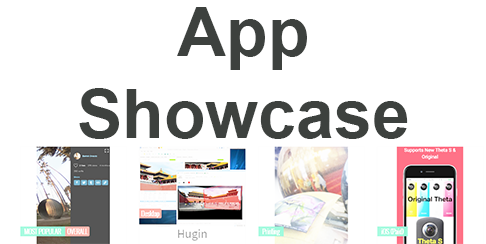
<style>
.page{position:relative;width:486px;height:244px;background:#ffffff}
.page>*{position:absolute;margin:0}
.t1{font:68px "Arial-BoldMT";color:#3d413e}
</style>
<div class="page">
<p class="t1" style="left:79px;top:7px;width:329px;height:132px;text-align:center">App<br>Showcase</p>
</div>
